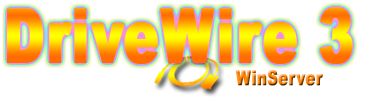
<style>
.page{position:relative;width:365px;height:97px;background:#ffffff}
.page>*{position:absolute;margin:0}
.t1{font:75px "Arial-Black";letter-spacing:0.01em;font-weight:bold;scale:0.7 1}
.t2{font:20.8px "Arial-Black";letter-spacing:0.01em;font-weight:bold;scale:0.7 1}
</style>
<div class="page">
<p class="t1" style="left:7px;top:7px;width:346px;height:57px">DriveWire 3</p>
<p class="t2" style="left:235px;top:70px;width:88px;height:16px">WinServer</p>
</div>
